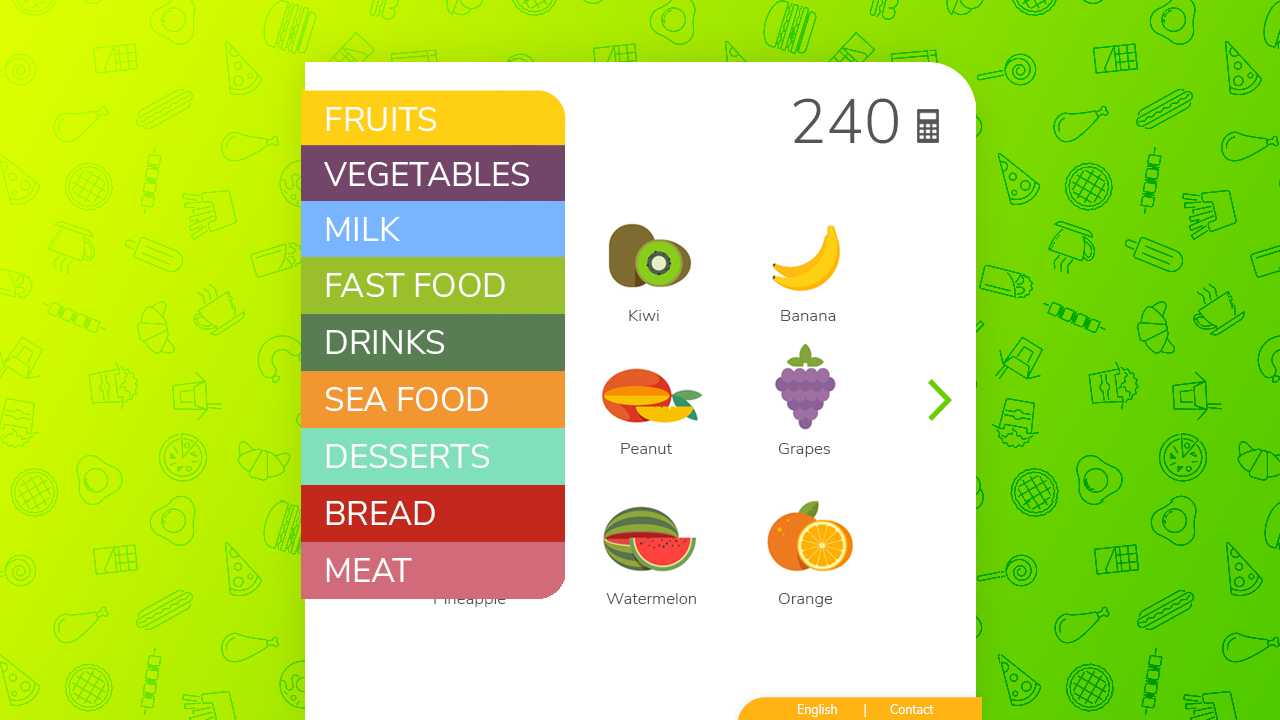
<style>
.page{position:relative;width:1280px;height:720px;background:#ffffff}
.page>*{position:absolute;margin:0}
.t1{font:62.5px "NunitoSans-Light";color:#555555}
.t2{font:33.3px "NunitoSans-Regular";color:#ffffff}
.t3{font:16.7px "NunitoSans-Light";color:#515151}
.t4{font:16.7px "NunitoSans-Light"}
.t5{font:12.5px "NunitoSans-Regular";color:#ffffff}
</style>
<div class="page">
<p class="t1" style="left:793px;top:98px;width:105px;height:46px">240</p>
<p class="t2" style="left:326px;top:107px;width:110px;height:24px">FRUITS</p>
<p class="t2" style="left:324px;top:162px;width:205px;height:24px">VEGETABLES</p>
<p class="t2" style="left:326px;top:217px;width:75px;height:24px">MILK</p>
<p class="t2" style="left:326px;top:273px;width:179px;height:24px">FAST FOOD</p>
<p class="t3" style="left:629px;top:310px;width:30px;height:11px">Kiwi</p>
<p class="t3" style="left:781px;top:310px;width:55px;height:11px">Banana</p>
<p class="t2" style="left:326px;top:330px;width:118px;height:24px">DRINKS</p>
<p class="t2" style="left:325px;top:387px;width:163px;height:24px">SEA FOOD</p>
<p class="t2" style="left:326px;top:444px;width:163px;height:24px">DESSERTS</p>
<p class="t3" style="left:621px;top:443px;width:51px;height:11px">Peanut</p>
<p class="t3" style="left:778px;top:443px;width:52px;height:14px">Grapes</p>
<p class="t2" style="left:326px;top:501px;width:109px;height:24px">BREAD</p>
<p class="t2" style="left:326px;top:558px;width:86px;height:24px">MEAT</p>
<p class="t4" style="left:434px;top:593px;width:72px;height:14px">Pineapple</p>
<p class="t3" style="left:606px;top:593px;width:90px;height:11px">Watermelon</p>
<p class="t3" style="left:778px;top:593px;width:55px;height:14px">Orange</p>
<p class="t5" style="left:798px;top:704px;width:68px;height:13px">English        |</p>
<p class="t5" style="left:890px;top:704px;width:44px;height:10px">Contact</p>
</div>
